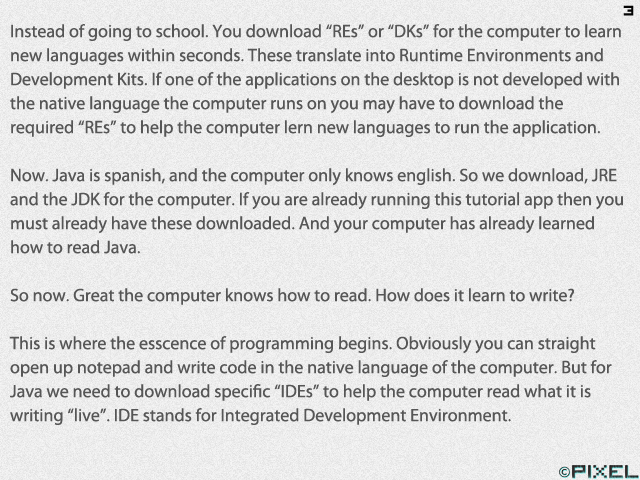
<style>
.page{position:relative;width:640px;height:480px}
.page>*{position:absolute;margin:0}
.t1{font:24px "VisitorTT2BRK";color:#050505}
.t2{font:18px/24px "MyriadPro-Regular";color:#565656}
</style>
<div class="page">
<p class="t1" style="left:623px;top:5px;width:11px;height:11px">3</p>
<p class="t2" style="left:9px;top:24px;width:614px;height:401px">Instead of going to school. You download “REs” or “DKs” for the computer to learn new languages within seconds. These translate into Runtime Environments and Development Kits. If one of the applications on the desktop is not developed with the native language the computer runs on you may have to download the required “REs” to help the computer lern new languages to run the application.<br><br>Now. Java is spanish, and the computer only knows english. So we download, JRE and the JDK for the computer. If you are already running this tutorial app then you must already have these downloaded. And your computer has already learned how to read Java. <br><br>So now. Great the computer knows how to read. How does it learn to write?<br><br>This is where the esscence of programming begins. Obviously you can straight open up notepad and write code in the native language of the computer. But for Java we need to download specific “IDEs” to help the computer read what it is writing “live”. IDE stands for Integrated Development Environment.</p>
</div>
